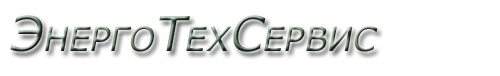
<style>
.page{position:relative;width:500px;height:76px;background:#ffffff}
.page>*{position:absolute;margin:0}
.t1{font:48px "Verdana";font-variant:small-caps;font-style:italic}
</style>
<div class="page">
<p class="t1" style="left:10px;top:15px;width:368px;height:37px">ЭнергоТехСервис</p>
</div>
